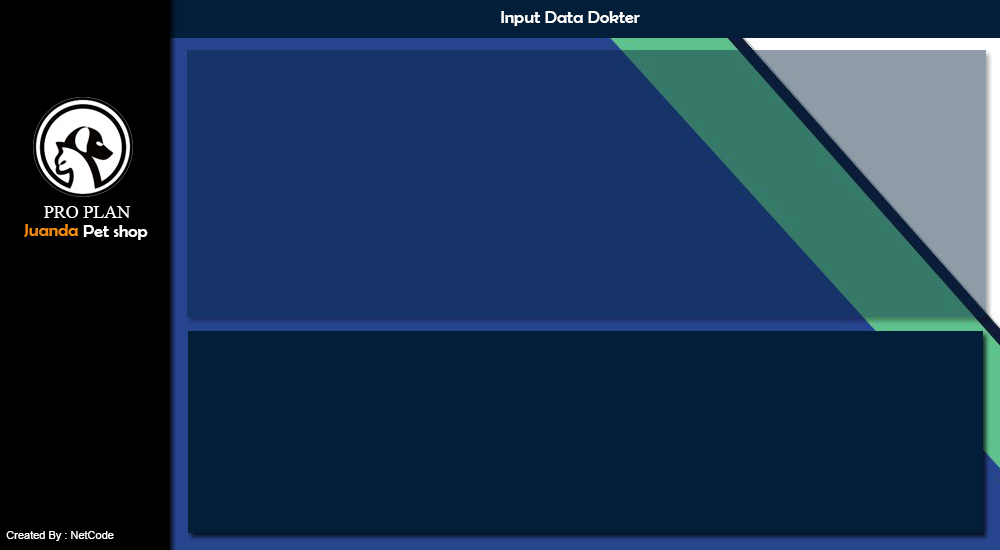
<style>
.page{position:relative;width:1000px;height:550px;background:#021e39}
.page>*{position:absolute;margin:0}
.t1{font:18px "BerlinSansFB-Reg";color:#fefefe}
.t2{font:18px "TimesNewRomanPSMT";color:#ffffff}
.t3{font:18px "BerlinSansFB-Reg";color:#f08a11}
.t4{font:11px "ArialMT";color:#fefefe}
</style>
<div class="page">
<p class="t1" style="left:501px;top:11px;width:139px;height:15px">Input Data Dokter</p>
<p class="t2" style="left:44px;top:206px;width:87px;height:12px">PRO PLAN</p>
<p class="t3" style="left:24px;top:224px;width:54px;height:13px">Juanda</p>
<p class="t1" style="left:83px;top:225px;width:65px;height:15px">Pet shop</p>
<p class="t4" style="left:6px;top:531px;width:108px;height:10px">Created By : NetCode</p>
</div>
